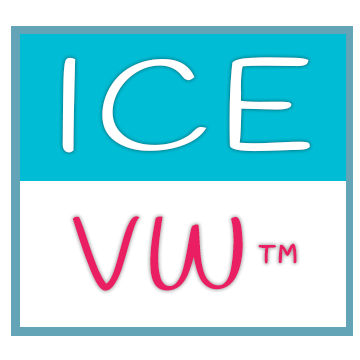
<style>
.page{position:relative;width:360px;height:360px;background:#ffffff}
.page>*{position:absolute;margin:0}
.t1{font:128.7px "Handlee-Regular";letter-spacing:0.05em;color:#ffffff;scale:1.2 1}
.t2{font:100.1px "Handlee-Regular";letter-spacing:0.05em;color:#e91e63}
.t3{font:65.6px "Handlee-Regular";letter-spacing:0.05em;color:#e91e63;scale:0.95 1}
</style>
<div class="page">
<p class="t1" style="left:62px;top:57px;width:248px;height:96px">ICE</p>
<p class="t2" style="left:73px;top:216px;width:170px;height:75px">VW</p>
<p class="t3" style="left:258px;top:243px;width:39px;height:21px">™</p>
</div>
